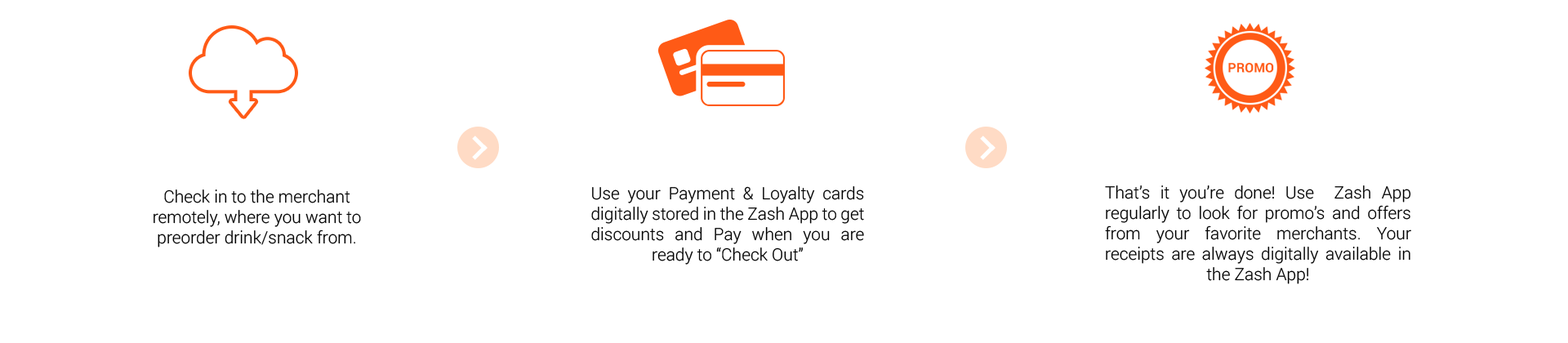
<style>
.page{position:relative;width:1568px;height:343px;background:#ffffff}
.page>*{position:absolute;margin:0}
.t1{font:17px "Roboto-Light";color:#000000}
</style>
<div class="page">
<p class="t1" style="left:1105px;top:185px;width:306px;height:99px;text-align:justify">That’s it you’re done! Use  Zash App regularly to look for promo’s and offers from your favorite merchants. Your receipts are always digitally available in the Zash App!</p>
<p class="t1" style="left:154px;top:189px;width:207px;height:58px;text-align:center">Check in to the merchant remotely, where you want to preorder drink/snack from.</p>
<p class="t1" style="left:591px;top:186px;width:273px;height:79px;text-align:justify">Use your Payment &amp; Loyalty cards digitally stored in the Zash App to get discounts and Pay when you are ready to “Check Out”</p>
</div>
